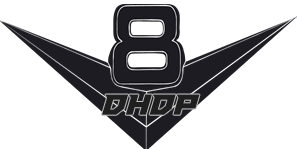
<style>
.page{position:relative;width:297px;height:149px;background:#ffffff}
.page>*{position:absolute;margin:0}
.t1{font:31.2px "Paladins";color:#1f1f1f;scale:0.77 1}
</style>
<div class="page">
<p class="t1" style="left:102px;top:94px;width:98px;height:21px">DHDP</p>
</div>
